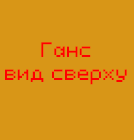
<style>
.page{position:relative;width:134px;height:140px;background:#d89617}
.page>*{position:absolute;margin:0}
.t1{font:19.1px "PixeloidSans";letter-spacing:0.005em;color:#ff0000}
</style>
<div class="page">
<p class="t1" style="left:5px;top:42px;width:122px;height:43px;text-align:center">Ганс<br>вид сверху</p>
</div>
